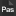
<style>
.page{position:relative;width:16px;height:16px;background:#333333}
.page>*{position:absolute;margin:0}
.t1{font:7.2px "ArialMT";color:#ffffff}
</style>
<div class="page">
<p class="t1" style="left:2px;top:6px;width:12px;height:6px">Pas</p>
</div>
